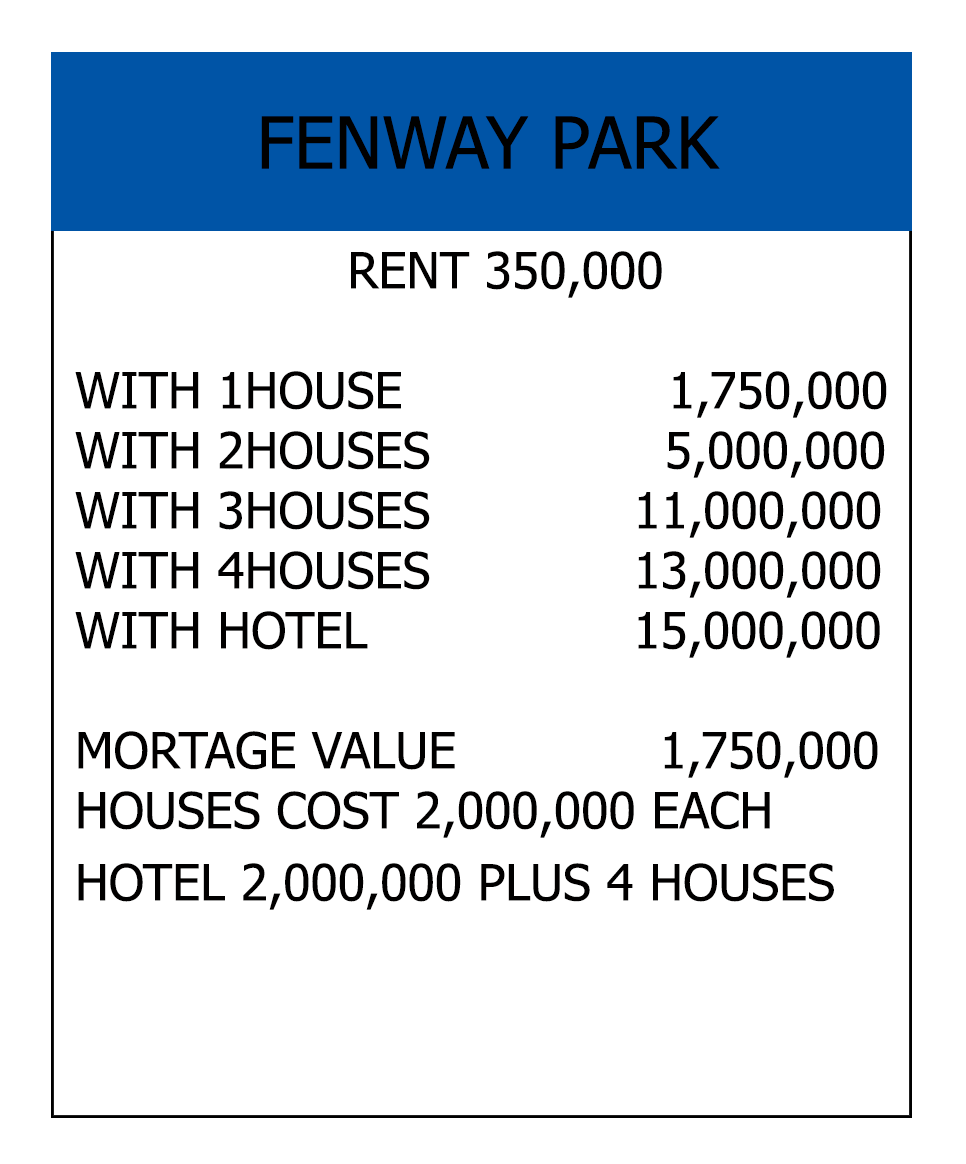
<style>
.page{position:relative;width:966px;height:1164px;background:#ffffff}
.page>*{position:absolute;margin:0}
.t1{font:72px "Tahoma";color:#000000}
.t2{font:50px "Tahoma";color:#010000}
</style>
<div class="page">
<p class="t1" style="left:261px;top:116px;width:459px;height:53px">FENWAY PARK</p>
<p class="t2" style="left:75px;top:251px;width:812px;height:659px;text-align:center">RENT 350,000<br><br>WITH 1HOUSE                 1,750,000<br>WITH 2HOUSES               5,000,000<br>WITH 3HOUSES             11,000,000<br>WITH 4HOUSES             13,000,000<br>WITH HOTEL                 15,000,000<br><br>MORTAGE VALUE             1,750,000<br>HOUSES COST 2,000,000 EACH<br>HOTEL 2,000,000 PLUS 4 HOUSES</p>
</div>
